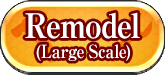
<style>
.page{position:relative;width:165px;height:75px}
.page>*{position:absolute;margin:0}
.t1{font:34px "RyuminPro-ExBold";letter-spacing:-0.04em;color:#ffffff;scale:0.9 1}
.t2{font:18px "RyuminPro-ExBold";letter-spacing:-0.04em;color:#ffffff;scale:0.9 1}
</style>
<div class="page">
<p class="t1" style="left:25px;top:12px;width:115px;height:27px">Remodel</p>
<p class="t2" style="left:36px;top:44px;width:94px;height:17px"><span class="t1"><br></span>(Large Scale)</p>
</div>
